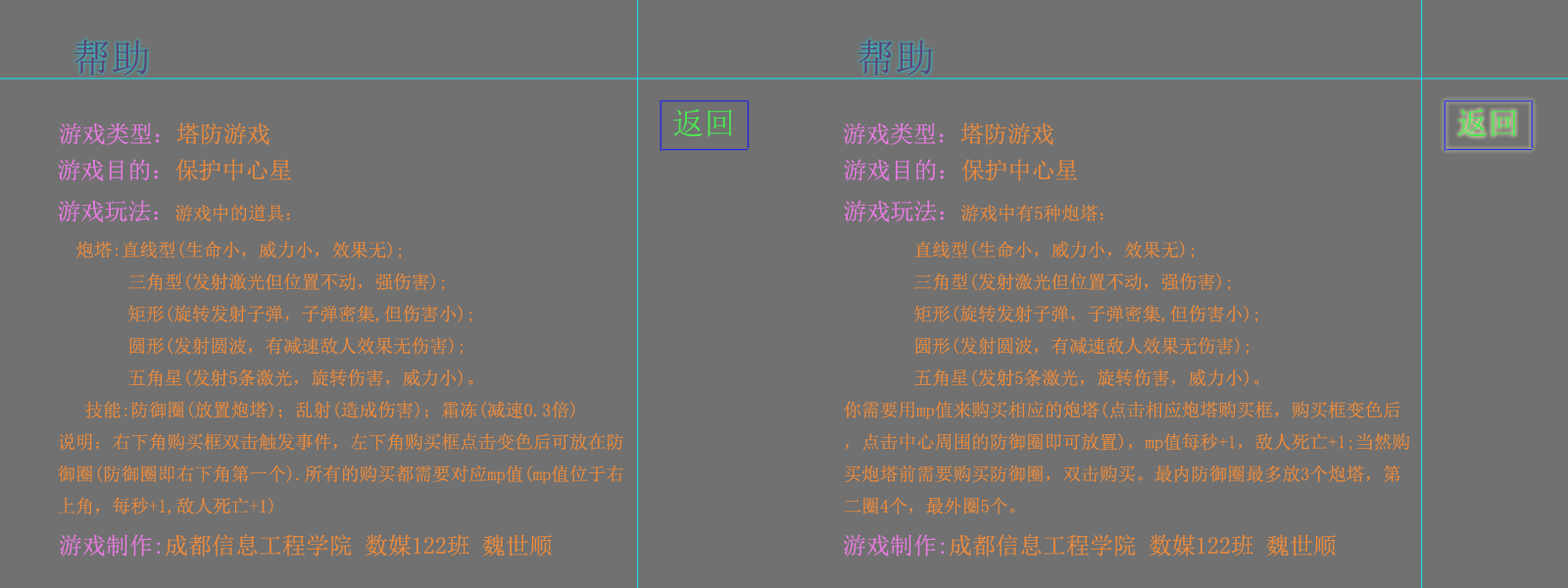
<style>
.page{position:relative;width:1568px;height:588px;background:#717171}
.page>*{position:absolute;margin:0}
.t1{font:18.3px "SimSun";color:#eb8a3b}
.t2{font:23.5px "SimSun";color:#e77be1}
.t3{font:23.5px "SimSun";color:#eb8a3b}
</style>
<div class="page">
<p class="t1" style="left:58px;top:159px;width:566px;height:356px"><span class="t2">游戏目的：</span><span class="t3">保护中心星<br></span><span class="t2">游戏玩法：</span>游戏中的道具：<br>  炮塔:直线型(生命小，威力小，效果无);<br>  三角型(发射激光但位置不动，强伤害);<br>  矩形(旋转发射子弹，子弹密集,但伤害小);<br>  圆形(发射圆波，有减速敌人效果无伤害);<br>     五角星(发射5条激光，旋转伤害，威力小)。<br>   技能:防御圈(放置炮塔)；乱射(造成伤害)；霜冻(减速0.3倍)<br>说明：右下角购买框双击触发事件，左下角购买框点击变色后可放在防御圈(防御圈即右下角第一个).所有的购买都需要对应mp值(mp值位于右上角，每秒+1,敌人死亡+1)</p>
<p class="t1" style="left:844px;top:159px;width:566px;height:355px"><span class="t2">游戏目的：</span><span class="t3">保护中心星<br></span><span class="t2">游戏玩法：</span>游戏中有5种炮塔：<br>  直线型(生命小，威力小，效果无);<br>  三角型(发射激光但位置不动，强伤害);<br>  矩形(旋转发射子弹，子弹密集,但伤害小);<br>  圆形(发射圆波，有减速敌人效果无伤害);<br>  五角星(发射5条激光，旋转伤害，威力小)。<br>你需要用mp值来购买相应的炮塔(点击相应炮塔购买框，购买框变色后，点击中心周围的防御圈即可放置)，mp值每秒+1，敌人死亡+1;当然购买炮塔前需要购买防御圈，双击购买。最内防御圈最多放3个炮塔，第二圈4个，最外圈5个。</p>
</div>
